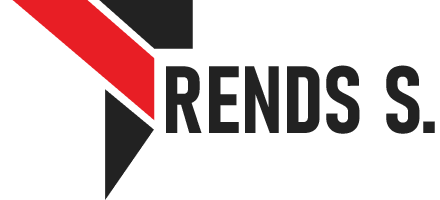
<style>
.page{position:relative;width:440px;height:200px;background:#ffffff}
.page>*{position:absolute;margin:0}
.t1{font:94px "Bahnschrift-BoldCondensed";letter-spacing:0.005em;color:#222222}
</style>
<div class="page">
<p class="t1" style="left:166px;top:65px;width:269px;height:69px">RENDS S.</p>
</div>
